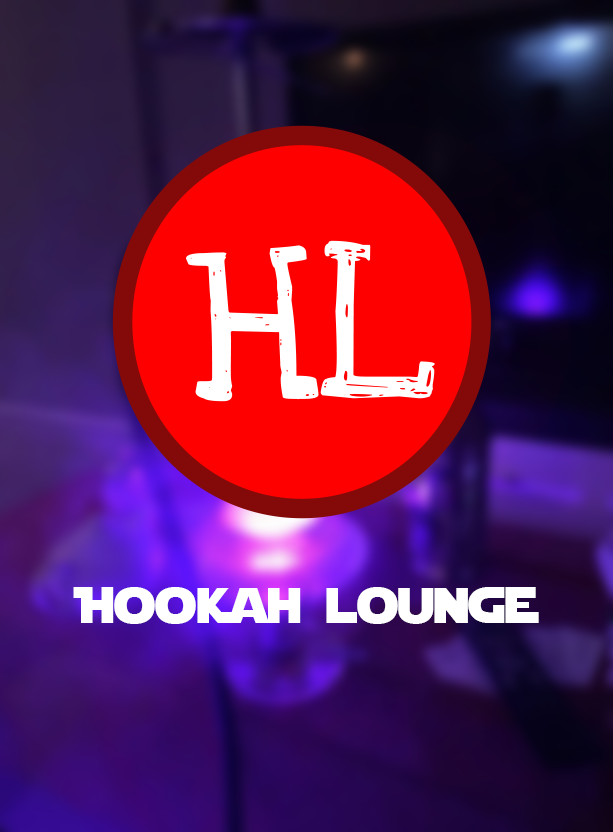
<style>
.page{position:relative;width:613px;height:832px}
.page>*{position:absolute;margin:0}
.t1{font:50px "StarJedi";color:#ffffff}
</style>
<div class="page">
<p class="t1" style="left:73px;top:587px;width:466px;height:37px">Hookah lounge</p>
</div>
